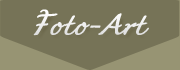
<style>
.page{position:relative;width:180px;height:70px;background:#767357}
.page>*{position:absolute;margin:0}
.t1{font:44px "Miama";color:#ececec;font-weight:bold}
</style>
<div class="page">
<p class="t1" style="left:33px;top:9px;width:116px;height:27px">Foto-Art</p>
</div>
